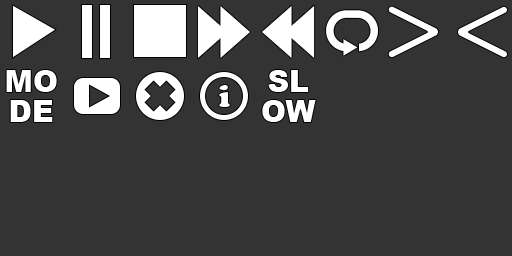
<style>
.page{position:relative;width:512px;height:256px;background:#333333}
.page>*{position:absolute;margin:0}
.t1{font:30px/30px "Arial-Black";color:#ffffff}
.t2{font:30px "CooperBlackStd";color:#ffffff}
</style>
<div class="page">
<p class="t1" style="left:6px;top:70px;width:51px;height:52px;text-align:center">MO<br>DE</p>
<p class="t1" style="left:262px;top:70px;width:54px;height:52px;text-align:center">SL<br>OW</p>
<p class="t2" style="left:219px;top:85px;width:11px;height:22px">i</p>
</div>
